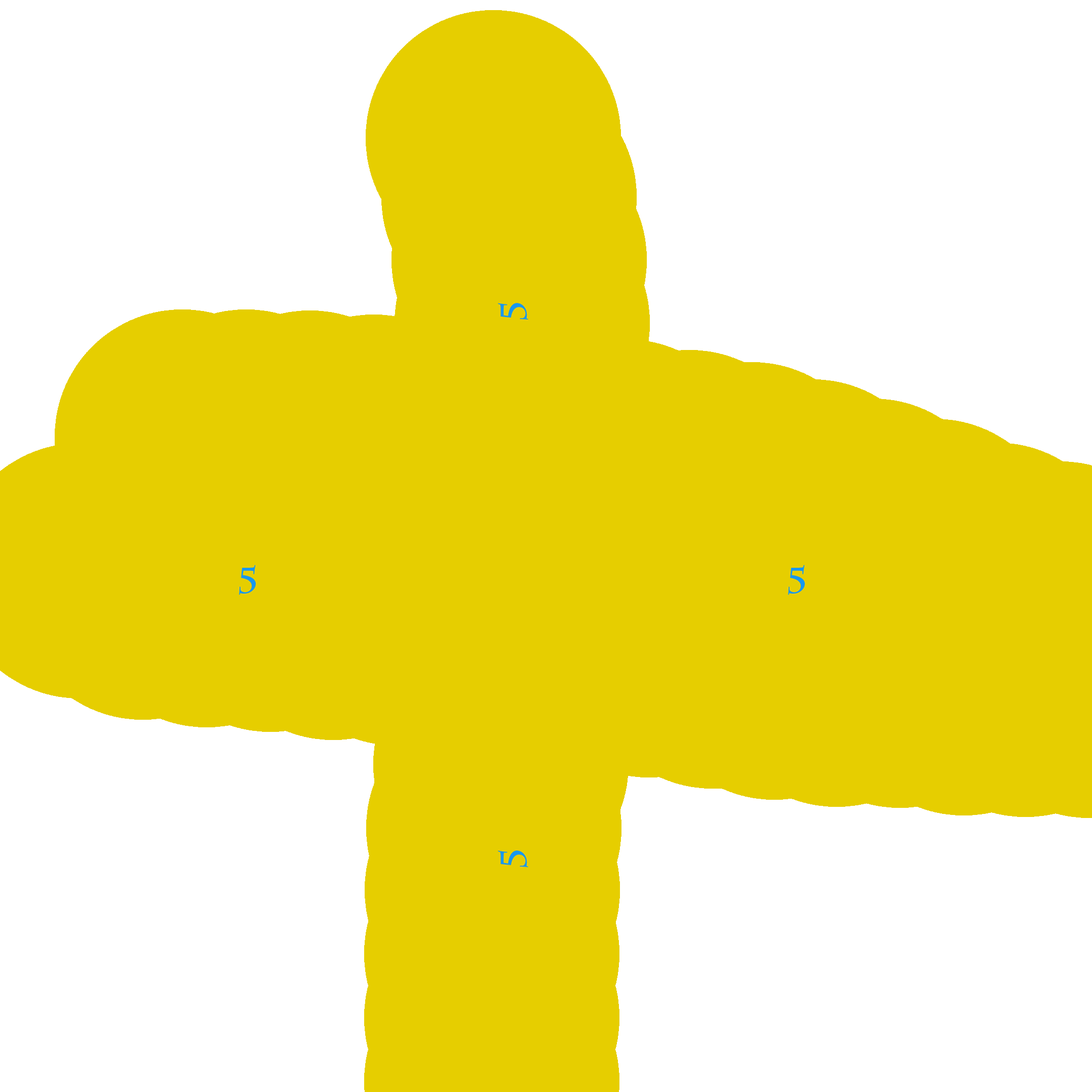
<style>
.page{position:relative;width:1092px;height:1092px;background:#e6ce00}
.page>*{position:absolute;margin:0}
.t1{font:36.5px "CharlemagneStd-Bold";color:#1897f0}
</style>
<div class="page">
<p class="t1" style="left:498px;top:303px;width:30px;height:17px;rotate:-90deg">5</p>
<p class="t1" style="left:239px;top:565px;width:17px;height:30px">5</p>
<p class="t1" style="left:788px;top:565px;width:17px;height:30px">5</p>
<p class="t1" style="left:498px;top:850px;width:30px;height:17px;rotate:-90deg">5</p>
</div>
